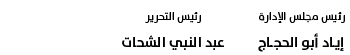
<style>
.page{position:relative;width:350px;height:55px;background:#ffffff}
.page>*{position:absolute;margin:0}
.t1{font:10.6px "TheSans-Plain";letter-spacing:-0.005em;color:#000000}
.t2{font:14px "TheSans-Bold";letter-spacing:-0.005em;color:#000000}
</style>
<div class="page">
<p class="t1" style="left:145px;top:12px;width:56px;height:11px">رئيس التحرير</p>
<p class="t1" style="left:259px;top:12px;width:86px;height:11px">رئيس مجلس الإدارة</p>
<p class="t2" style="left:122px;top:35px;width:102px;height:15px">عبد النبي الشحات</p>
<p class="t2" style="left:258px;top:33px;width:86px;height:19px">إيـاد أبو الحجــاج</p>
</div>
